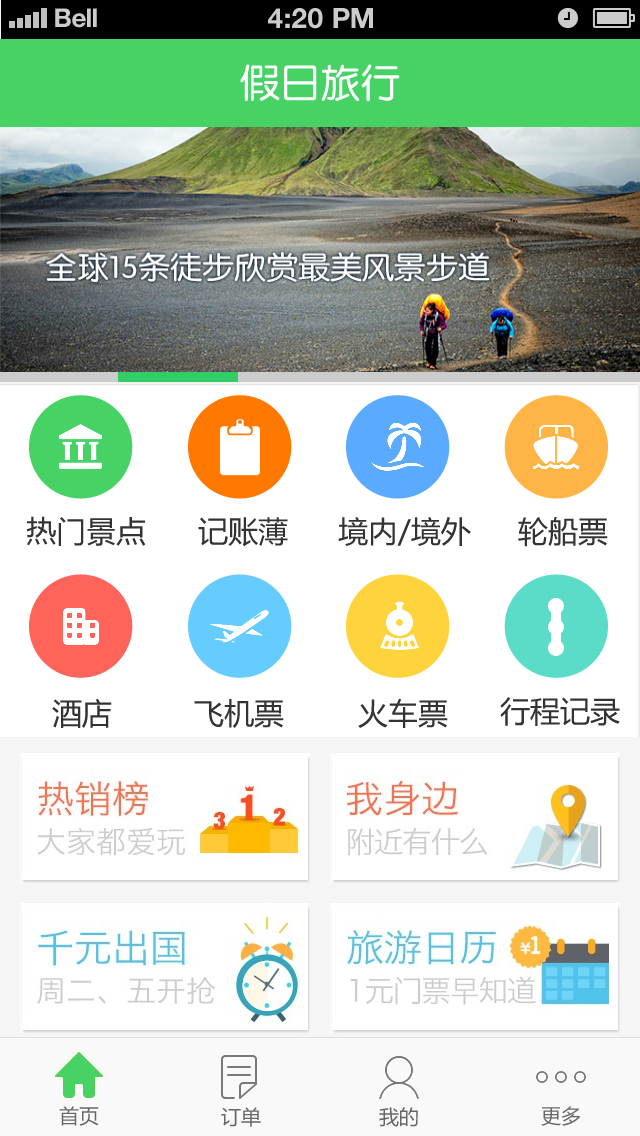
<style>
.page{position:relative;width:640px;height:1136px;background:#ffffff}
.page>*{position:absolute;margin:0}
.t1{font:26px "HelveticaNeue-Bold";color:#cccccc}
.t2{font:28px "HelveticaNeue-Bold";color:#cccccc;text-transform:uppercase}
.t3{font:40px "FZY3FW--GB1-0";color:#fefefe}
.t4{font:30px "MicrosoftYaHei";color:#333333}
.t5{font:20px "MicrosoftYaHei";color:#666666}
</style>
<div class="page">
<p class="t1" style="left:55px;top:8px;width:42px;height:20px">Bell</p>
<p class="t2" style="left:268px;top:8px;width:105px;height:21px">4:20 pM</p>
<p class="t3" style="left:240px;top:64px;width:160px;height:38px">假日旅行</p>
<p class="t4" style="left:26px;top:516px;width:120px;height:30px">热门景点</p>
<p class="t4" style="left:198px;top:517px;width:90px;height:30px">记账薄</p>
<p class="t4" style="left:338px;top:517px;width:133px;height:29px">境内/境外</p>
<p class="t4" style="left:518px;top:517px;width:90px;height:30px">轮船票</p>
<p class="t4" style="left:52px;top:698px;width:60px;height:30px">酒店</p>
<p class="t4" style="left:194px;top:699px;width:90px;height:29px">飞机票</p>
<p class="t4" style="left:358px;top:698px;width:90px;height:30px">火车票</p>
<p class="t4" style="left:500px;top:697px;width:120px;height:29px">行程记录</p>
<p class="t5" style="left:59px;top:1106px;width:40px;height:20px">首页</p>
<p class="t5" style="left:221px;top:1107px;width:40px;height:20px">订单</p>
<p class="t5" style="left:379px;top:1107px;width:39px;height:20px">我的</p>
<p class="t5" style="left:541px;top:1106px;width:39px;height:20px">更多</p>
</div>
